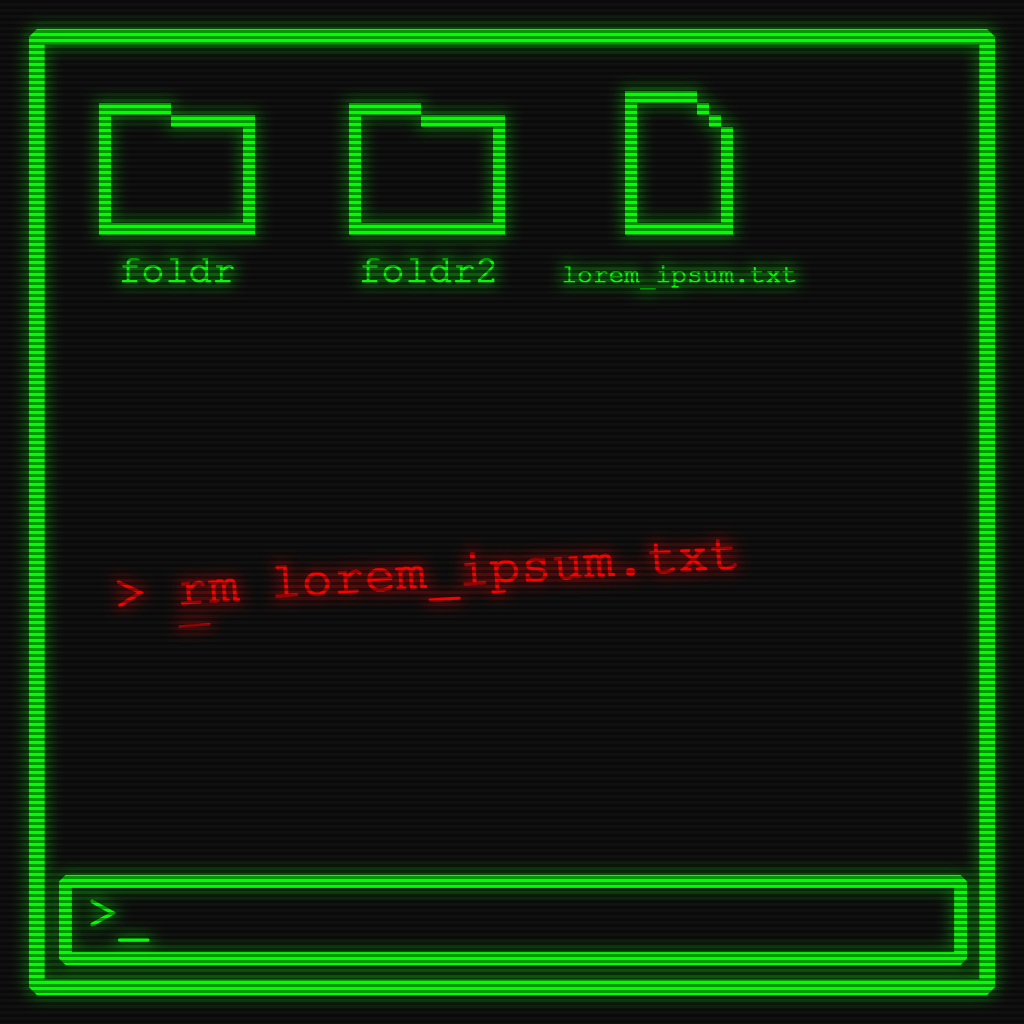
<style>
.page{position:relative;width:1024px;height:1024px;background:#0a0a0a}
.page>*{position:absolute;margin:0}
.t1{font:37.5px "CourierNewPSMT";font-weight:bold}
.t2{font:25px "CourierNewPSMT";font-weight:bold}
.t3{font:50px "CourierNewPSMT";font-weight:bold}
.t4{font:50px "CourierNewPSMT";font-weight:bold;text-decoration:underline}
</style>
<div class="page">
<p class="t1" style="left:121px;top:258px;width:113px;height:25px">foldr</p>
<p class="t1" style="left:361px;top:258px;width:134px;height:25px">foldr2</p>
<p class="t2" style="left:563px;top:265px;width:232px;height:25px">lorem_ipsum.txt</p>
<p class="t3" style="left:116px;top:539px;width:621px;height:89px;rotate:-4deg">&gt; <span class="t4">r</span>m lorem_ipsum.txt</p>
<p class="t3" style="left:90px;top:899px;width:60px;height:43px">&gt;_</p>
</div>
